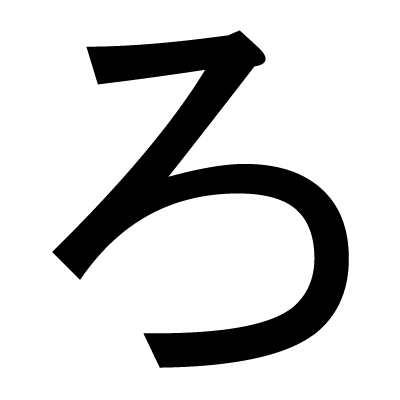
<style>
.page{position:relative;width:400px;height:400px;background:#ffffff}
.page>*{position:absolute;margin:0}
.t1{font:416.7px "MS-PGothic";color:#000000}
</style>
<div class="page">
<p class="t1" style="left:52px;top:30px;width:297px;height:338px">ろ</p>
</div>
